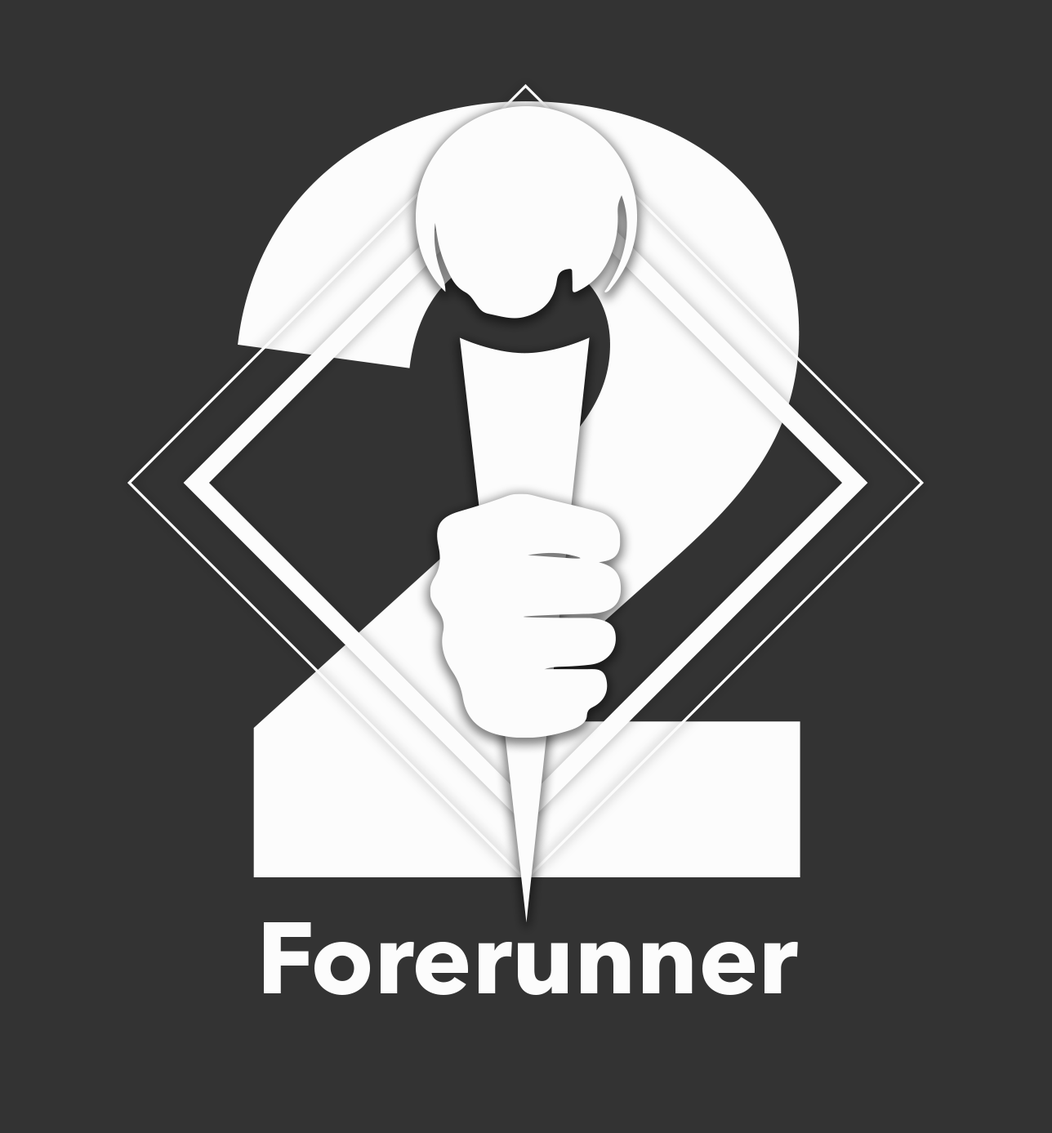
<style>
.page{position:relative;width:1052px;height:1133px;background:#333333}
.page>*{position:absolute;margin:0}
.t1{font:1067.2px "AvenirNextLTPro-Bold";color:#fcfcfc}
.t2{font:100.9px "AvenirNextLTPro-Bold";color:#fcfcfc}
</style>
<div class="page">
<p class="t1" style="left:238px;top:101px;width:563px;height:776px">2</p>
<p class="t2" style="left:264px;top:922px;width:534px;height:73px">Forerunner</p>
</div>
